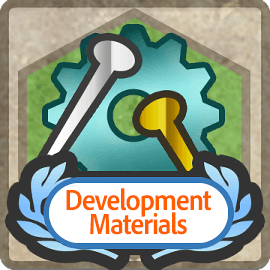
<style>
.page{position:relative;width:270px;height:270px}
.page>*{position:absolute;margin:0}
.t1{font:30px/24px "AdobeClean-Bold";letter-spacing:-0.04em;color:#ff5d00;scale:0.9 1}
</style>
<div class="page">
<p class="t1" style="left:66px;top:188px;width:145px;height:47px;text-align:center">Development<br>Materials</p>
</div>
